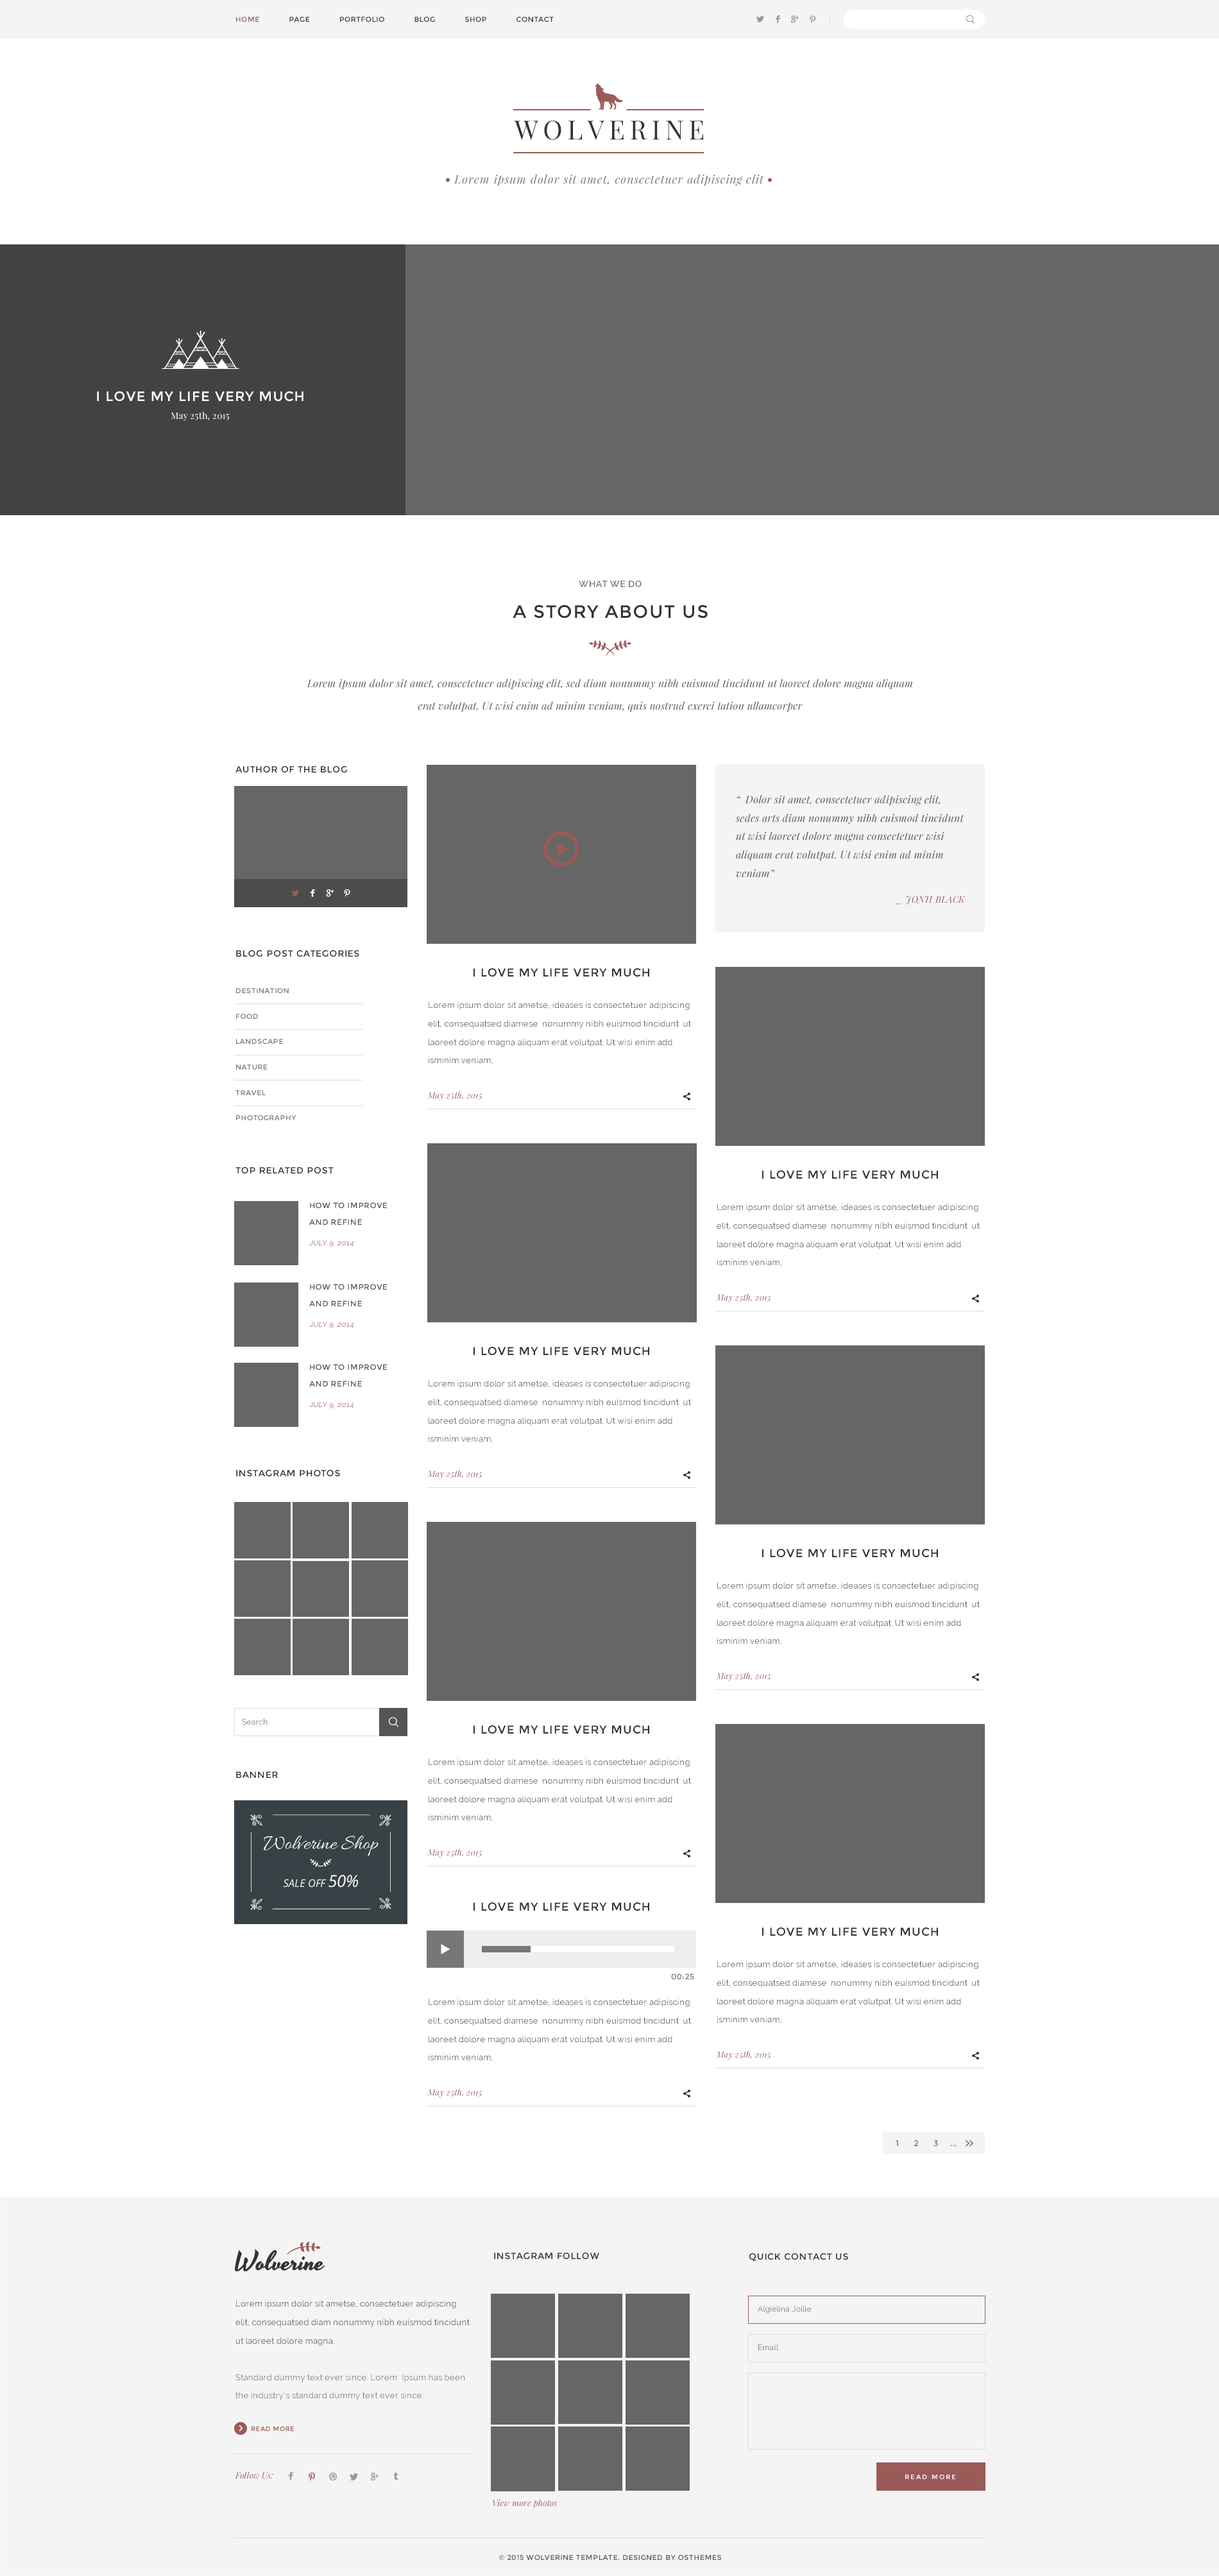
<style>
.page{position:relative;width:1219px;height:2576px;background:#ffffff}
.page>*{position:absolute;margin:0}
.t1{font:7.1px "Montserrat-Regular";letter-spacing:0.05em;color:#333333}
.t2{font:7.1px "Montserrat-Regular";letter-spacing:0.05em;color:#9a5957}
.t3{font:26.5px "PlayfairDisplay-Regular";letter-spacing:0.1em;color:#333333}
.t4{font:11.5px "PlayfairDisplay-Italic";letter-spacing:0.05em;color:#777777}
.t5{font:13.5px "Montserrat-Regular";letter-spacing:0.05em;color:#ffffff}
.t6{font:9px "PlayfairDisplay-Regular";letter-spacing:0.02em;color:#ffffff}
.t7{font:9px "Raleway-SemiBold";letter-spacing:0.05em;color:#777777}
.t8{font:18px "Montserrat-Regular";letter-spacing:0.05em;color:#333333}
.t9{font:10.3px/22.6px "PlayfairDisplay-Italic";letter-spacing:0.02em;color:#545454}
.t10{font:9px "Montserrat-Regular";letter-spacing:0.05em;color:#333333}
.t11{font:10.3px/18.5px "PlayfairDisplay-Italic";letter-spacing:0.02em;color:#535353}
.t12{font:9px/16.2px "PlayfairDisplay-Italic";letter-spacing:0.02em;color:#995958}
.t13{font:11.5px "Montserrat-Regular";letter-spacing:0.05em;color:#333333}
.t14{font:7.1px/12.7px "Montserrat-Regular";letter-spacing:0.05em;color:#777777}
.t15{font:8.3px/18.3px "Raleway";letter-spacing:0.02em;color:#545454}
.t16{font:8.3px "PlayfairDisplay-Italic";letter-spacing:0.02em;color:#995958}
.t17{font:7.7px/15.4px "Montserrat-Regular";letter-spacing:0.05em;color:#545454}
.t18{font:7.1px/14.1px "Raleway";letter-spacing:0.05em;color:#995958;font-style:italic}
.t19{font:7.7px "Raleway";letter-spacing:0.02em;color:#777777}
.t20{font:7.7px "Montserrat-Regular";letter-spacing:0.04em;color:#777777}
.t21{font:8.3px "Montserrat-Regular";color:#777777}
.t22{font:8.3px "Montserrat-Regular";color:#995958}
.t23{font:8.3px/18.3px "Raleway";letter-spacing:0.02em;color:#535353}
.t24{font:8.3px/18.3px "Raleway";letter-spacing:0.02em;color:#777777}
.t25{font:6.4px "Montserrat-Regular";letter-spacing:0.05em;color:#9a5a58}
.t26{font:6.4px "Montserrat-Regular";letter-spacing:0.2em;color:#ffffff}
.t27{font:8.3px "PlayfairDisplay-Italic";letter-spacing:0.02em;color:#9a5a58}
.t28{font:7.1px "Montserrat-Regular";letter-spacing:0.05em;color:#555555}
</style>
<div class="page">
<p class="t1" style="left:236px;top:17px;width:318px;height:5px"><span class="t2">HOME      </span>PAGE      PORTFOLIO      BLOG      SHOP      CONTACT</p>
<p class="t3" style="left:514px;top:121px;width:190px;height:19px">WOLVERINE</p>
<p class="t4" style="left:454px;top:174px;width:310px;height:12px">Lorem ipsum dolor sit amet, consectetuer adipiscing elit</p>
<p class="t5" style="left:97px;top:391px;width:206px;height:11px">I LOVE MY LIFE VERY MUCH</p>
<p class="t6" style="left:171px;top:411px;width:58px;height:10px">May 25th, 2015</p>
<p class="t7" style="left:579px;top:581px;width:63px;height:6px">WHAT WE DO</p>
<p class="t8" style="left:513px;top:605px;width:195px;height:13px">A STORY ABOUT US</p>
<p class="t9" style="left:307px;top:679px;width:606px;height:33px;text-align:center">Lorem ipsum dolor sit amet, consectetuer adipiscing elit, sed diam nonummy nibh euismod tincidunt ut laoreet dolore magna aliquam erat volutpat. Ut wisi enim ad minim veniam, quis nostrud exerci tation ullamcorper</p>
<p class="t10" style="left:235px;top:766px;width:112px;height:6px">AUTHOR OF THE BLOG</p>
<p class="t11" style="left:735px;top:795px;width:230px;height:110px">“  Dolor sit amet, consectetuer adipiscing elit, sedes arts diam nonummy nibh euismod tincidunt ut wisi laoreet dolore magna consectetuer wisi aliquam erat volutpat. Ut wisi enim ad minim veniam”<br> <br><span class="t12">_ JONH BLACK</span></p>
<p class="t10" style="left:236px;top:950px;width:123px;height:7px">BLOG POST CATEGORIES</p>
<p class="t13" style="left:473px;top:968px;width:176px;height:9px">I LOVE MY LIFE VERY MUCH</p>
<p class="t14" style="left:235px;top:988px;width:61px;height:132px">DESTINATION<br><br>FOOD<br><br>LANDSCAPE<br><br>NATURE<br><br>TRAVEL<br><br>PHOTOGRAPHY</p>
<p class="t15" style="left:428px;top:1002px;width:263px;height:62px">Lorem ipsum dolor sit ametse, ideases is consectetuer adipiscing elit, consequatsed diamese  nonummy nibh euismod tincidunt  ut laoreet dolore magna aliquam erat volutpat. Ut wisi enim add isminim veniam,</p>
<p class="t16" style="left:427px;top:1091px;width:55px;height:9px">May 25th, 2015</p>
<p class="t10" style="left:235px;top:1167px;width:99px;height:6px">TOP RELATED POST</p>
<p class="t13" style="left:762px;top:1170px;width:176px;height:9px">I LOVE MY LIFE VERY MUCH</p>
<p class="t17" style="left:309px;top:1202px;width:78px;height:45px">HOW TO IMPROVE AND REFINE <br> <br><span class="t18">JULY 9, 2014</span></p>
<p class="t15" style="left:717px;top:1204px;width:263px;height:62px">Lorem ipsum dolor sit ametse, ideases is consectetuer adipiscing elit, consequatsed diamese  nonummy nibh euismod tincidunt  ut laoreet dolore magna aliquam erat volutpat. Ut wisi enim add isminim veniam,</p>
<p class="t17" style="left:309px;top:1284px;width:78px;height:44px">HOW TO IMPROVE AND REFINE <br> <br><span class="t18">JULY 9, 2014</span></p>
<p class="t16" style="left:716px;top:1293px;width:55px;height:9px">May 25th, 2015</p>
<p class="t13" style="left:473px;top:1347px;width:176px;height:9px">I LOVE MY LIFE VERY MUCH</p>
<p class="t17" style="left:309px;top:1364px;width:78px;height:44px">HOW TO IMPROVE AND REFINE <br> <br><span class="t18">JULY 9, 2014</span></p>
<p class="t15" style="left:428px;top:1380px;width:263px;height:62px">Lorem ipsum dolor sit ametse, ideases is consectetuer adipiscing elit, consequatsed diamese  nonummy nibh euismod tincidunt  ut laoreet dolore magna aliquam erat volutpat. Ut wisi enim add isminim veniam,</p>
<p class="t10" style="left:236px;top:1470px;width:104px;height:6px">INSTAGRAM PHOTOS</p>
<p class="t16" style="left:427px;top:1470px;width:55px;height:9px">May 25th, 2015</p>
<p class="t13" style="left:762px;top:1549px;width:176px;height:9px">I LOVE MY LIFE VERY MUCH</p>
<p class="t15" style="left:717px;top:1582px;width:263px;height:62px">Lorem ipsum dolor sit ametse, ideases is consectetuer adipiscing elit, consequatsed diamese  nonummy nibh euismod tincidunt  ut laoreet dolore magna aliquam erat volutpat. Ut wisi enim add isminim veniam,</p>
<p class="t16" style="left:716px;top:1672px;width:55px;height:9px">May 25th, 2015</p>
<p class="t19" style="left:242px;top:1719px;width:26px;height:6px">Search</p>
<p class="t13" style="left:473px;top:1725px;width:176px;height:9px">I LOVE MY LIFE VERY MUCH</p>
<p class="t15" style="left:428px;top:1759px;width:263px;height:62px">Lorem ipsum dolor sit ametse, ideases is consectetuer adipiscing elit, consequatsed diamese  nonummy nibh euismod tincidunt  ut laoreet dolore magna aliquam erat volutpat. Ut wisi enim add isminim veniam,</p>
<p class="t10" style="left:236px;top:1771px;width:42px;height:7px">BANNER</p>
<p class="t16" style="left:427px;top:1848px;width:55px;height:9px">May 25th, 2015</p>
<p class="t13" style="left:473px;top:1902px;width:176px;height:9px">I LOVE MY LIFE VERY MUCH</p>
<p class="t13" style="left:762px;top:1927px;width:176px;height:9px">I LOVE MY LIFE VERY MUCH</p>
<p class="t15" style="left:717px;top:1961px;width:263px;height:62px">Lorem ipsum dolor sit ametse, ideases is consectetuer adipiscing elit, consequatsed diamese  nonummy nibh euismod tincidunt  ut laoreet dolore magna aliquam erat volutpat. Ut wisi enim add isminim veniam,</p>
<p class="t20" style="left:671px;top:1974px;width:23px;height:5px">00:25</p>
<p class="t15" style="left:428px;top:1999px;width:263px;height:62px">Lorem ipsum dolor sit ametse, ideases is consectetuer adipiscing elit, consequatsed diamese  nonummy nibh euismod tincidunt  ut laoreet dolore magna aliquam erat volutpat. Ut wisi enim add isminim veniam,</p>
<p class="t16" style="left:716px;top:2051px;width:55px;height:9px">May 25th, 2015</p>
<p class="t16" style="left:427px;top:2088px;width:55px;height:9px">May 25th, 2015</p>
<p class="t21" style="left:896px;top:2140px;width:61px;height:6px"><span class="t22">1</span>     2     3    ...</p>
<p class="t10" style="left:494px;top:2253px;width:105px;height:6px">INSTAGRAM FOLLOW</p>
<p class="t10" style="left:749px;top:2253px;width:99px;height:8px">QUICK CONTACT US</p>
<p class="t23" style="left:235px;top:2300px;width:235px;height:100px">Lorem ipsum dolor sit ametse, consectetuer adipiscing elit, consequatsed diam nonummy nibh euismod tincidunt  ut laoreet dolore magna.<br><span class="t24"> <br>Standard dummy text ever since. Lorem  Ipsum has been the industry’s standard dummy text ever since.</span></p>
<p class="t19" style="left:758px;top:2306px;width:54px;height:8px">Algielina Jollie</p>
<p class="t19" style="left:758px;top:2344px;width:21px;height:6px">Email</p>
<p class="t25" style="left:252px;top:2426px;width:42px;height:5px">READ MORE</p>
<p class="t16" style="left:235px;top:2471px;width:38px;height:8px">Follow Us:</p>
<p class="t26" style="left:905px;top:2474px;width:50px;height:5px">READ MORE</p>
<p class="t27" style="left:493px;top:2499px;width:64px;height:9px">View more photos</p>
<p class="t28" style="left:499px;top:2555px;width:223px;height:6px">© 2015 WOLVERINE TEMPLATE. DESIGNED BY OSTHEMES</p>
</div>
